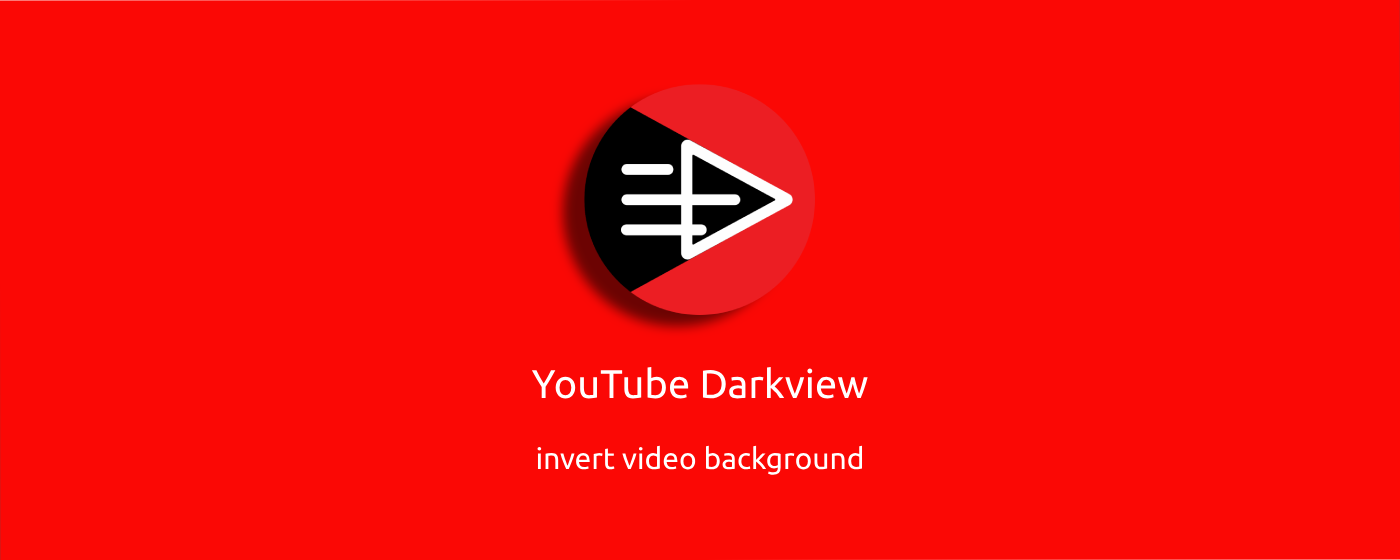
<style>
.page{position:relative;width:1400px;height:560px;background:#fb0805}
.page>*{position:absolute;margin:0}
.t1{font:40px "Ubuntu-Regular";color:#ffffff}
.t2{font:30px "Ubuntu-Regular";color:#ffffff}
</style>
<div class="page">
<p class="t1" style="left:531px;top:366px;width:337px;height:33px">YouTube Darkview</p>
<p class="t2" style="left:537px;top:445px;width:326px;height:30px">invert video background</p>
</div>
